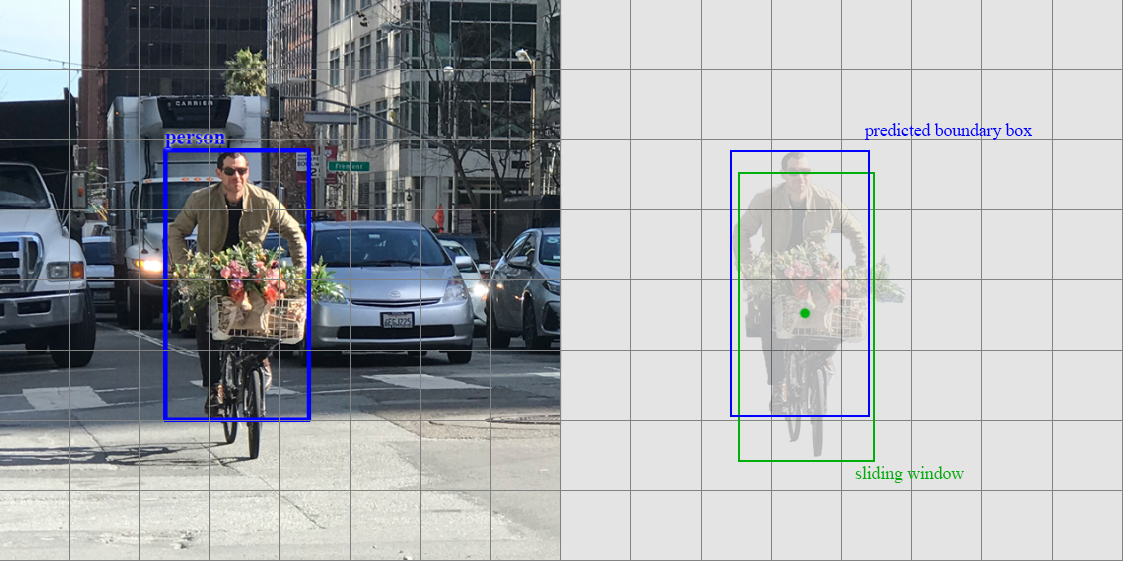
<style>
.page{position:relative;width:1123px;height:561px;background:#e4e4e4}
.page>*{position:absolute;margin:0}
.t1{font:18px "TimesNewRomanPSMT";letter-spacing:-0.01em;color:#0000ff}
.t2{font:18px "TimesNewRomanPSMT";letter-spacing:-0.01em;color:#00af0c}
</style>
<div class="page">
<p class="t1" style="left:864px;top:123px;width:169px;height:17px">predicted boundary box</p>
<p class="t2" style="left:855px;top:466px;width:109px;height:17px">sliding window</p>
</div>
